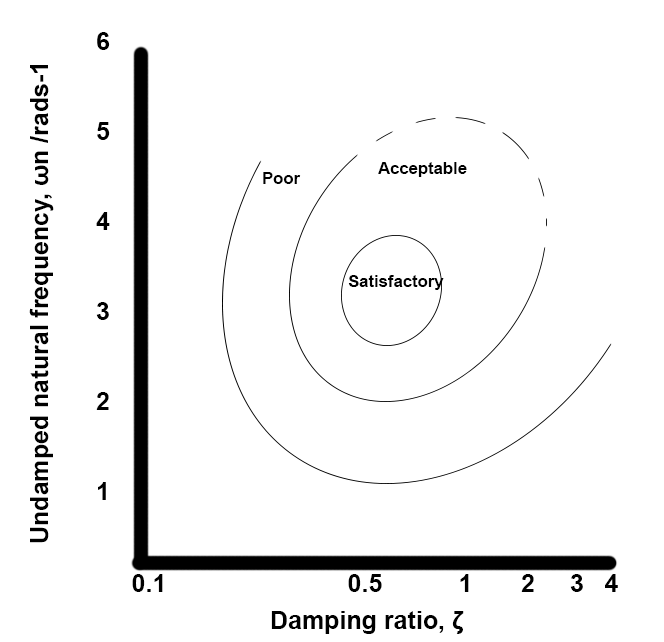
<style>
.page{position:relative;width:664px;height:642px;background:#ffffff}
.page>*{position:absolute;margin:0}
.t1{font:25px "Arial-BoldMT";color:#000000}
.t2{font:16.7px "Arial-BoldMT";color:#000000}
</style>
<div class="page">
<p class="t1" style="left:96px;top:32px;width:14px;height:468px">6<br><br><br>5<br><br><br>4<br><br><br>3<br><br><br>2<br><br><br>1</p>
<p class="t1" style="left:29px;top:65px;width:25px;height:478px;rotate:-90deg">Undamped natural frequency, ωn /rads-1</p>
<p class="t2" style="left:263px;top:172px;width:38px;height:12px">Poor</p>
<p class="t2" style="left:378px;top:162px;width:89px;height:15px">Acceptable</p>
<p class="t2" style="left:348px;top:275px;width:96px;height:15px">Satisfactory</p>
<p class="t1" style="left:132px;top:574px;width:486px;height:18px">0.1      0.5           1       2     3   4</p>
<p class="t1" style="left:271px;top:611px;width:193px;height:23px">Damping ratio, ζ</p>
</div>
